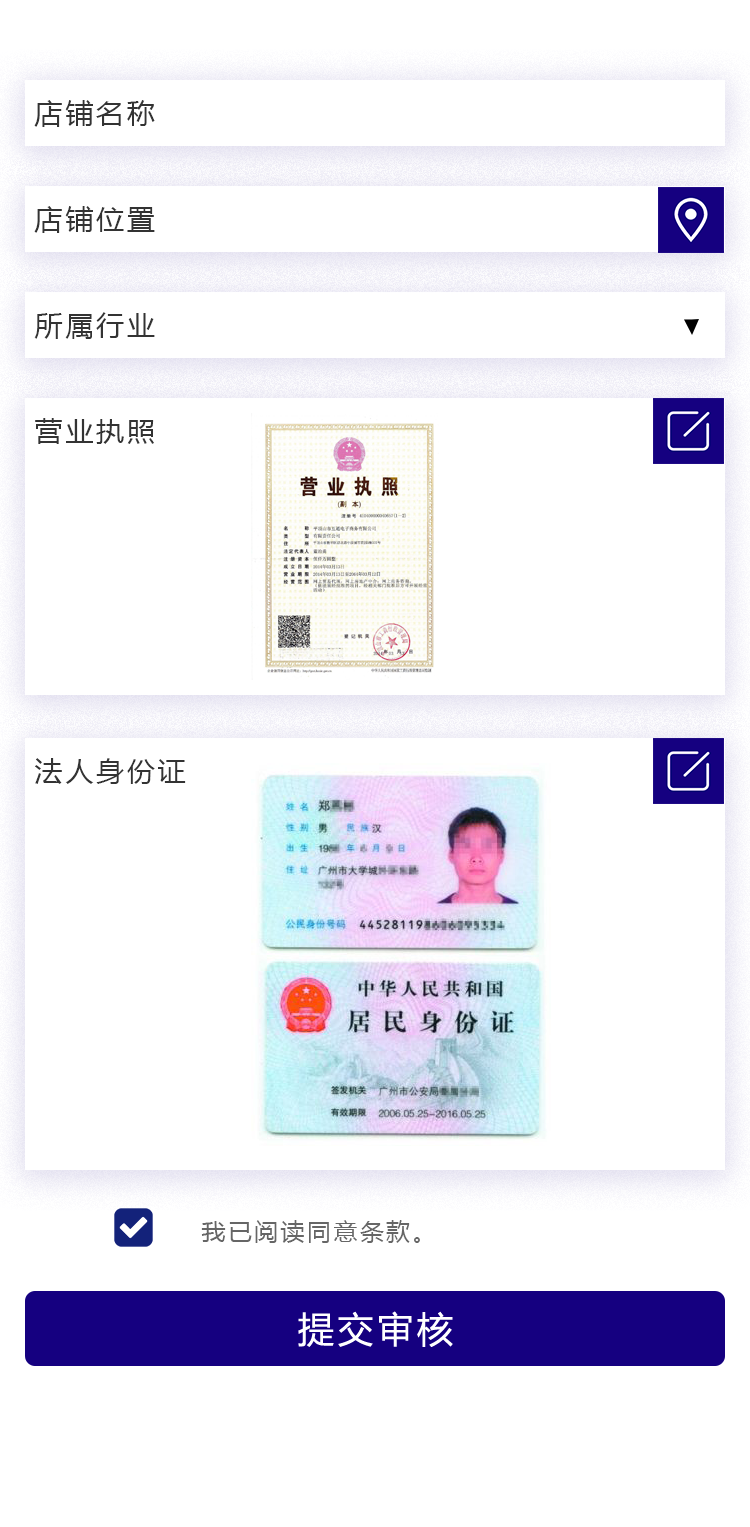
<style>
.page{position:relative;width:750px;height:1527px;background:#ffffff}
.page>*{position:absolute;margin:0}
.t1{font:28px "MicrosoftYaHei";letter-spacing:0.1em;color:#333333}
.t2{font:24px "MicrosoftYaHei";letter-spacing:0.1em;color:#666666}
</style>
<div class="page">
<p class="t1" style="left:34px;top:100px;width:121px;height:27px">店铺名称</p>
<p class="t1" style="left:34px;top:206px;width:121px;height:27px">店铺位置</p>
<p class="t1" style="left:34px;top:312px;width:121px;height:27px">所属行业</p>
<p class="t1" style="left:35px;top:418px;width:119px;height:26px">营业执照</p>
<p class="t1" style="left:35px;top:758px;width:151px;height:26px">法人身份证</p>
<p class="t2" style="left:201px;top:1220px;width:219px;height:23px">我已阅读同意条款。</p>
</div>
